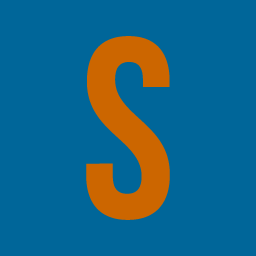
<style>
.page{position:relative;width:256px;height:256px;background:#006699}
.page>*{position:absolute;margin:0}
.t1{font:256.4px "BebasNeue";color:#cc6600}
</style>
<div class="page">
<p class="t1" style="left:86px;top:36px;width:84px;height:184px">S</p>
</div>
